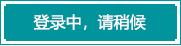
<style>
.page{position:relative;width:181px;height:46px;background:#02949d}
.page>*{position:absolute;margin:0}
.t1{font:16px "MicrosoftYaHeiUI";color:#ffffff}
</style>
<div class="page">
<p class="t1" style="left:33px;top:14px;width:113px;height:16px">登录中，请稍候</p>
</div>
